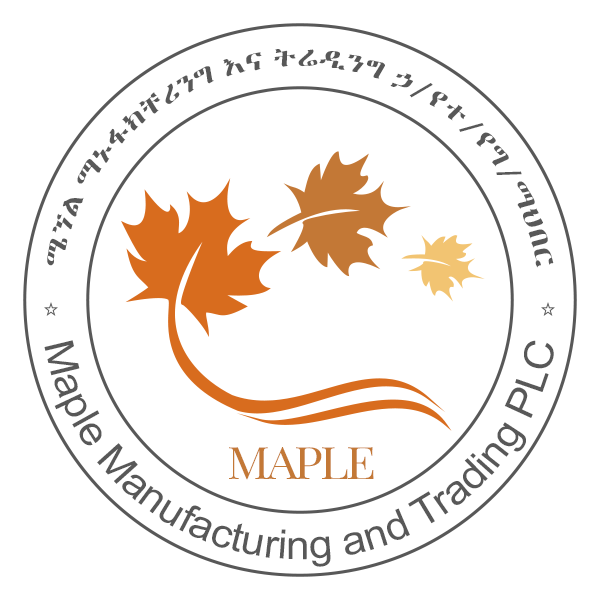
<style>
.page{position:relative;width:600px;height:600px;background:#ffffff}
.page>*{position:absolute;margin:0}
.t1{font:25.7px "EthiopicWashRaBold";color:#585858;scale:1.28 1}
.t2{font:40.3px/87.5px "ArialNarrow";color:#585858;scale:1.28 1}
.t3{font:44.7px "PlayfairDisplay-Regular";letter-spacing:-0.06em;color:#c37836;scale:1.1 1}
</style>
<div class="page">
<p class="t1" style="left:47px;top:49px;width:507px;height:219px;rotate:18deg">ሜኘል ማኑፋክቸሪንግ እና ትሬዲንግ ኃ/የተ/የግ/ማህበር</p>
<p class="t2" style="left:44px;top:340px;width:510px;height:227px;text-align:right">Maple Manufacturing and Trading PLC</p>
<p class="t3" style="left:229px;top:447px;width:145px;height:33px">MAPLE</p>
</div>
